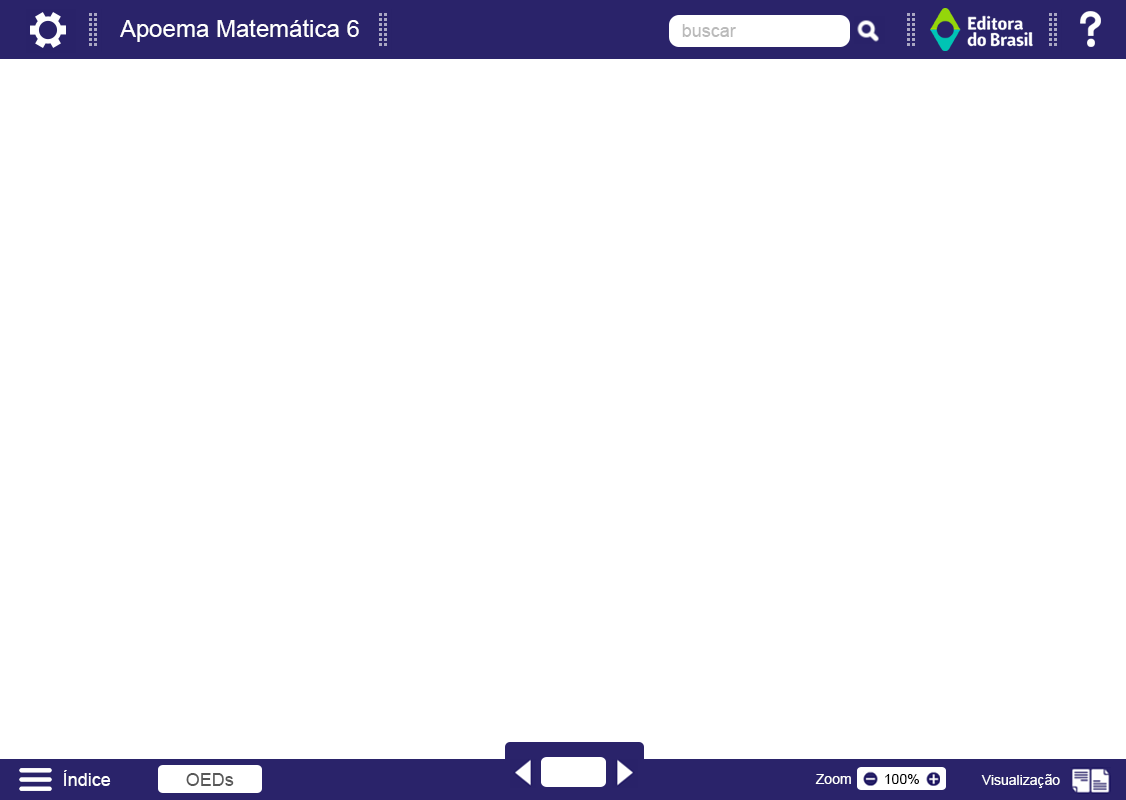
<style>
.page{position:relative;width:1126px;height:800px;background:#ffffff}
.page>*{position:absolute;margin:0}
.t1{font:24px "ArialMT";color:#ffffff}
.t2{font:18px "ArialMT";color:#bababa}
.t3{font:18px "ArialMT";color:#ffffff}
.t4{font:18px "ArialMT";color:#575757}
.t5{font:14px "ArialMT";color:#ffffff}
.t6{font:14px "ArialMT";color:#000000}
</style>
<div class="page">
<p class="t1" style="left:120px;top:19px;width:239px;height:23px">Apoema Matemática 6</p>
<p class="t2" style="left:682px;top:24px;width:54px;height:13px">buscar</p>
<p class="t3" style="left:64px;top:770px;width:47px;height:16px">Índice</p>
<p class="t4" style="left:186px;top:773px;width:48px;height:13px">OEDs</p>
<p class="t5" style="left:815px;top:774px;width:36px;height:10px">Zoom</p>
<p class="t6" style="left:885px;top:774px;width:34px;height:10px">100%</p>
<p class="t5" style="left:981px;top:774px;width:79px;height:14px">Visualização</p>
</div>
